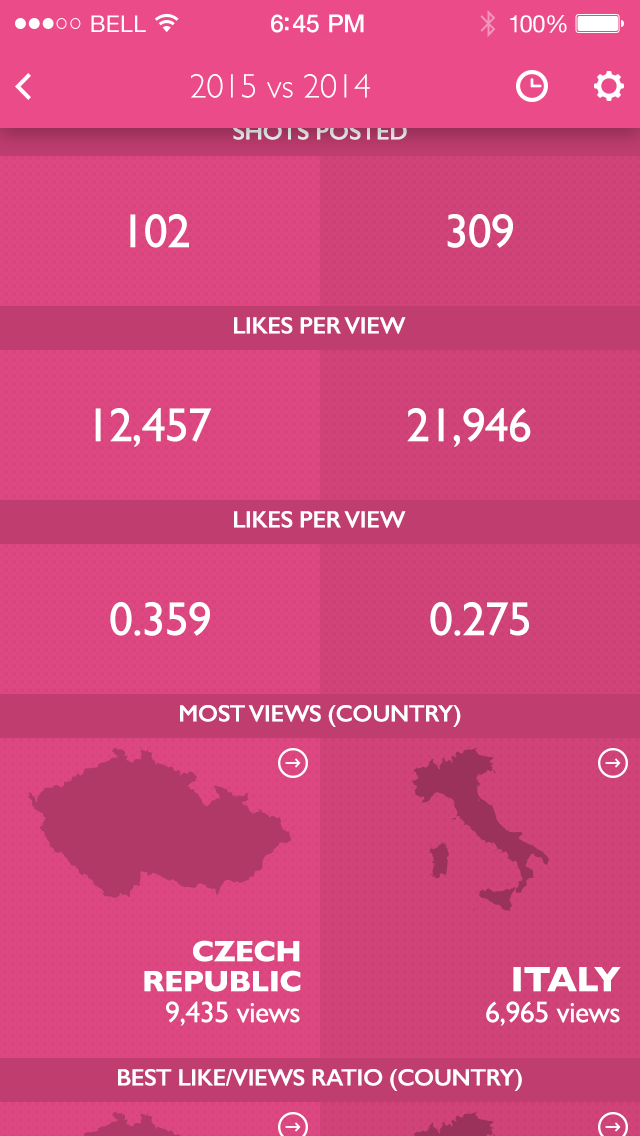
<style>
.page{position:relative;width:640px;height:1136px;background:#d14379}
.page>*{position:absolute;margin:0}
.t1{font:34px "GillSans-Light";color:#ffffff}
.t2{font:24px "GillSans-SemiBold";letter-spacing:-0.02em}
.t3{font:48px "GillSans";letter-spacing:-0.02em;color:#ffffff}
.t4{font:24px "GillSans-SemiBold";letter-spacing:-0.02em;color:#ffffff}
.t5{font:30px/30px "GillSans-Bold";letter-spacing:-0.02em;color:#ffffff;text-transform:uppercase}
.t6{font:36px "GillSans-Bold";letter-spacing:-0.02em;color:#ffffff}
.t7{font:30px "GillSans";letter-spacing:-0.02em;color:#ffffff}
</style>
<div class="page">
<p class="t1" style="left:191px;top:74px;width:179px;height:24px">2015 vs 2014</p>
<p class="t2" style="left:233px;top:123px;width:174px;height:17px">SHOTS POSTED</p>
<p class="t3" style="left:130px;top:214px;width:59px;height:34px">102</p>
<p class="t3" style="left:447px;top:214px;width:66px;height:34px">309</p>
<p class="t4" style="left:234px;top:317px;width:172px;height:17px">LIKES PER VIEW</p>
<p class="t3" style="left:95px;top:408px;width:117px;height:39px">12,457</p>
<p class="t3" style="left:407px;top:408px;width:124px;height:39px">21,946</p>
<p class="t4" style="left:234px;top:511px;width:172px;height:17px">LIKES PER VIEW</p>
<p class="t3" style="left:110px;top:602px;width:100px;height:34px">0.359</p>
<p class="t3" style="left:430px;top:602px;width:99px;height:34px">0.275</p>
<p class="t4" style="left:180px;top:705px;width:281px;height:22px">MOST VIEWS (COUNTRY)</p>
<p class="t5" style="left:144px;top:940px;width:157px;height:52px;text-align:right">Czech<br>republic</p>
<p class="t6" style="left:513px;top:967px;width:108px;height:25px">ITALY</p>
<p class="t7" style="left:166px;top:1001px;width:134px;height:25px">9,435 views</p>
<p class="t7" style="left:486px;top:1001px;width:134px;height:25px">6,965 views</p>
<p class="t4" style="left:118px;top:1069px;width:404px;height:22px">BEST LIKE/VIEWS RATIO (COUNTRY)</p>
</div>
